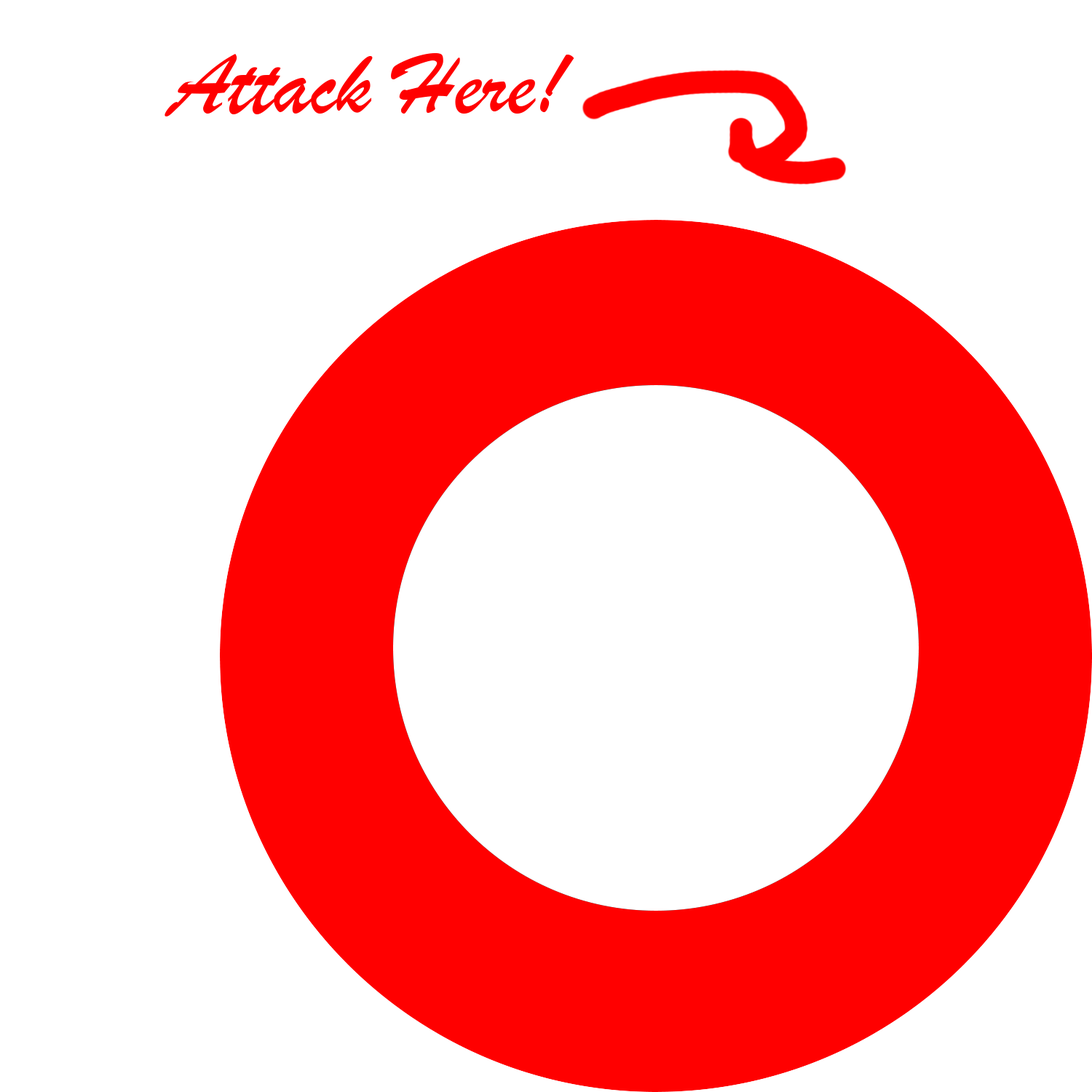
<style>
.page{position:relative;width:1092px;height:1092px;background:#ffffff}
.page>*{position:absolute;margin:0}
.t1{font:91px "BrushScriptMT";color:#ff0000}
</style>
<div class="page">
<p class="t1" style="left:165px;top:53px;width:409px;height:63px">Attack Here!</p>
</div>
